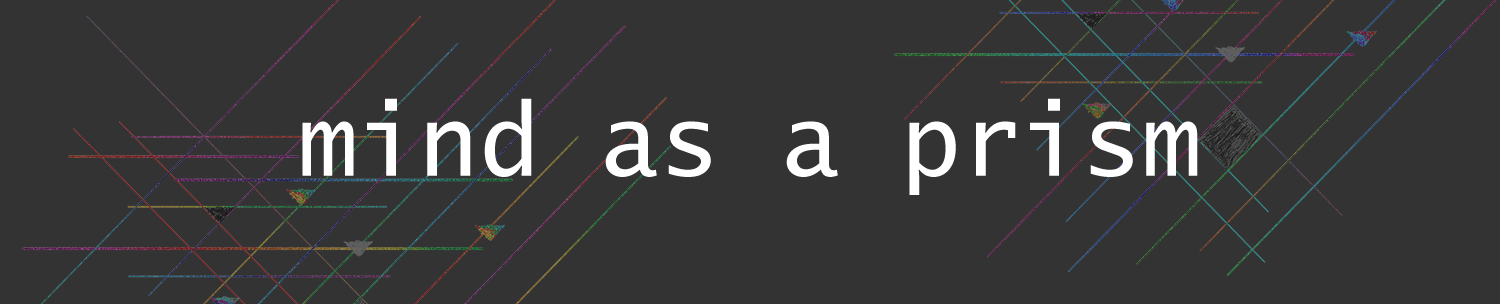
<style>
.page{position:relative;width:1500px;height:304px;background:#333333}
.page>*{position:absolute;margin:0}
.t1{font:100px "LucidaSans-Typewriter";color:#ffffff}
</style>
<div class="page">
<p class="t1" style="left:302px;top:98px;width:896px;height:97px">mind as a prism</p>
</div>
